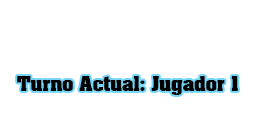
<style>
.page{position:relative;width:256px;height:128px;background:#ffffff}
.page>*{position:absolute;margin:0}
.t1{font:18px "AardvarkBold";color:#000000}
</style>
<div class="page">
<p class="t1" style="left:17px;top:76px;width:221px;height:19px">Turno Actual: Jugador 1</p>
</div>
